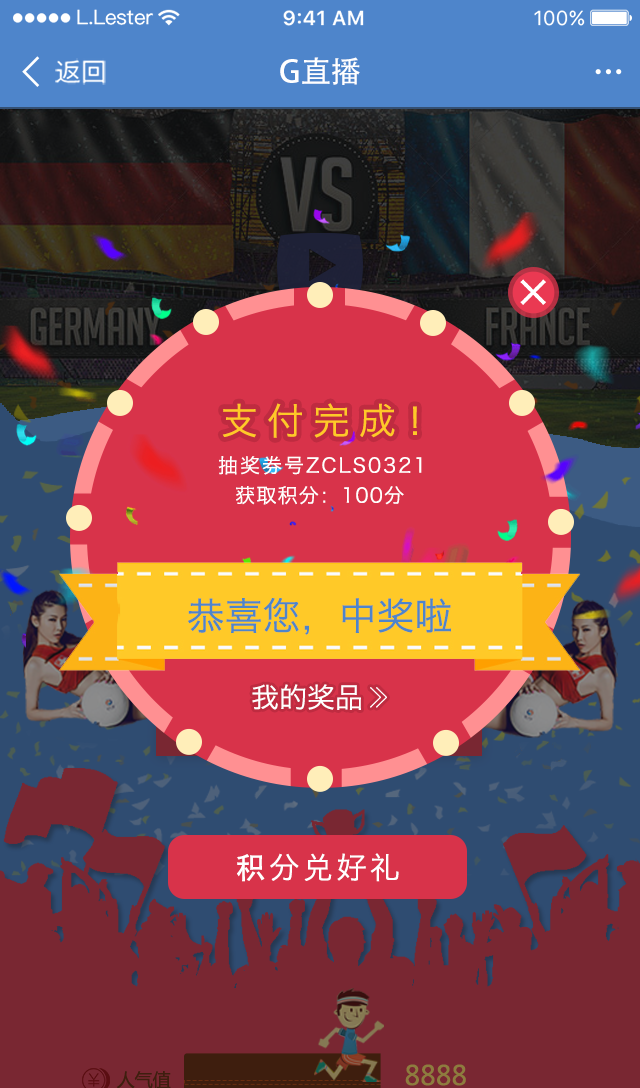
<style>
.page{position:relative;width:640px;height:1088px}
.page>*{position:absolute;margin:0}
.t1{font:25.6px "SourceHanSansCN-Regular";color:#ffffff}
.t2{font:30.7px "AdobeHeitiStd-Regular";color:#ffffff}
.t3{font:37.2px "HiraginoSansGB-W3";letter-spacing:0.24em;color:#ffc928}
.t4{font:37.2px "HiraginoSansGB-W3";color:#ffc928}
.t5{font:20px "HiraginoSansGB-W3";letter-spacing:0.1em;color:#ffffff}
.t6{font:20px "HiraginoSansGB-W3";letter-spacing:0.06em;color:#ffffff}
.t7{font:38px "HiraginoSansGB-W3";color:#4e85cb}
.t8{font:28px "HiraginoSansGB-W3";color:#ffffff}
.t9{font:30px "HiraginoSansGB-W3";letter-spacing:0.12em;color:#ffffff}
.t10{font:30px "AdobeHeitiStd-Regular";letter-spacing:0.12em;color:#ffffff}
</style>
<div class="page">
<p class="t1" style="left:55px;top:58px;width:51px;height:27px">返回</p>
<p class="t2" style="left:280px;top:57px;width:80px;height:28px">G直播</p>
<p class="t3" style="left:222px;top:403px;width:195px;height:35px"><span class="t4">   </span>支付完成！</p>
<p class="t5" style="left:218px;top:456px;width:204px;height:19px">抽奖券号ZCLS0321</p>
<p class="t6" style="left:236px;top:486px;width:168px;height:19px">获取积分：100分</p>
<p class="t7" style="left:188px;top:598px;width:263px;height:37px">恭喜您，中奖啦</p>
<p class="t8" style="left:252px;top:684px;width:109px;height:26px">我的奖品</p>
<p class="t9" style="left:237px;top:853px;width:162px;height:29px"><span class="t10">积</span>分兑好礼</p>
</div>
